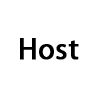
<style>
.page{position:relative;width:100px;height:100px;background:#ffffff}
.page>*{position:absolute;margin:0}
.t1{font:30px "MyriadPro-Regular";color:#000000;font-weight:bold}
</style>
<div class="page">
<p class="t1" style="left:20px;top:38px;width:59px;height:22px">Host</p>
</div>
